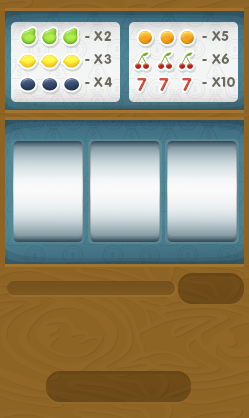
<style>
.page{position:relative;width:249px;height:418px}
.page>*{position:absolute;margin:0}
.t1{font:14px "RotondaC-Bold";letter-spacing:0.04em;color:#6d6a5b;text-transform:uppercase}
.t2{font:18.1px "RotondaC-Bold";letter-spacing:0.04em;color:#d75039;text-transform:uppercase}
</style>
<div class="page">
<p class="t1" style="left:85px;top:31px;width:27px;height:10px">- х2</p>
<p class="t1" style="left:202px;top:31px;width:27px;height:10px">- х5</p>
<p class="t1" style="left:85px;top:54px;width:27px;height:10px">- х3</p>
<p class="t1" style="left:202px;top:53px;width:27px;height:11px">- х6</p>
<p class="t1" style="left:85px;top:77px;width:28px;height:10px">- х4</p>
<p class="t2" style="left:137px;top:78px;width:10px;height:13px">7</p>
<p class="t2" style="left:159px;top:78px;width:10px;height:13px">7</p>
<p class="t2" style="left:182px;top:78px;width:10px;height:13px">7</p>
<p class="t1" style="left:202px;top:77px;width:33px;height:10px">- х10</p>
</div>
